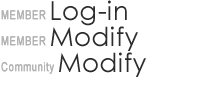
<style>
.page{position:relative;width:200px;height:100px;background:#ffffff}
.page>*{position:absolute;margin:0}
.t1{font:26px "CenturyGothic";letter-spacing:0.025em;color:#2c2c2c}
.t2{font:12px "ArialMT";letter-spacing:0.025em;color:#b2b2b2;font-weight:bold;scale:0.8 1}
</style>
<div class="page">
<p class="t1" style="left:51px;top:0px;width:76px;height:26px">Log-in</p>
<p class="t2" style="left:1px;top:10px;width:45px;height:10px">MEMBER</p>
<p class="t1" style="left:51px;top:26px;width:87px;height:25px">Modify</p>
<p class="t2" style="left:1px;top:36px;width:45px;height:10px">MEMBER</p>
<p class="t1" style="left:59px;top:52px;width:87px;height:25px">Modify</p>
<p class="t2" style="left:1px;top:62px;width:53px;height:12px">Community</p>
</div>
